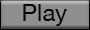
<style>
.page{position:relative;width:90px;height:30px;background:#8e908f}
.page>*{position:absolute;margin:0}
.t1{font:24px "HelveticaNeue";color:#010101}
</style>
<div class="page">
<p class="t1" style="left:23px;top:4px;width:44px;height:22px">Play</p>
</div>
